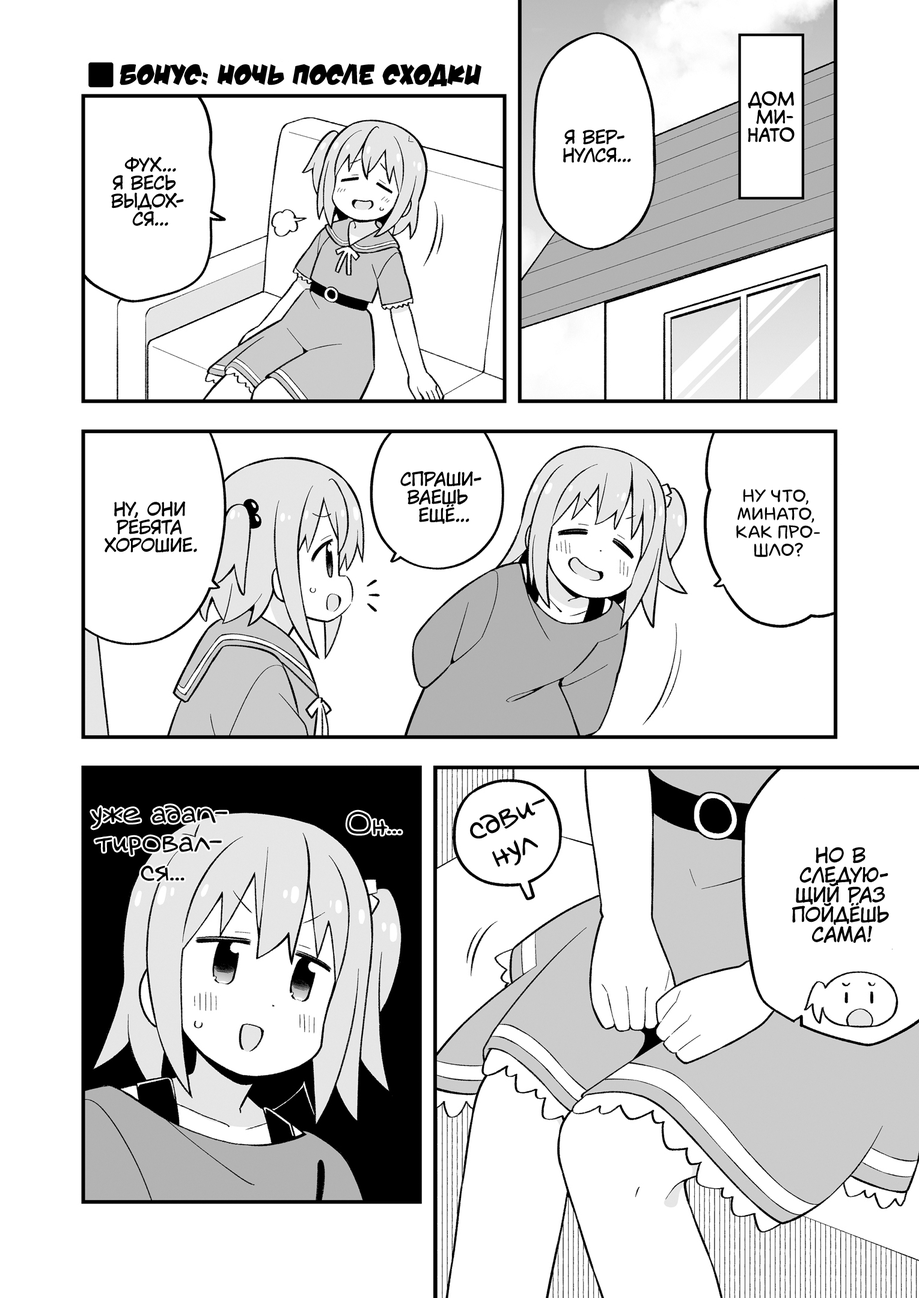
<style>
.page{position:relative;width:919px;height:1298px;background:#ffffff}
.page>*{position:absolute;margin:0}
.t1{font:28.8px "v_DamnNoisyKids";color:#000000;text-transform:uppercase}
.t2{font:18px "v_CCMonologous";color:#000000;text-transform:uppercase}
.t3{font:18px "KuraiVoice2";color:#000000;text-transform:uppercase}
.t4{font:18px "laCartoonerie";color:#000000;text-transform:uppercase}
.t5{font:32.4px "v_Augie";color:#000000}
.t6{font:28.8px "v_Augie";color:#000000}
.t7{font:19.8px "KuraiVoice2";color:#000000;text-transform:uppercase}
</style>
<div class="page">
<p class="t1" style="left:120px;top:63px;width:361px;height:24px">Бонус: Ночь после сходки</p>
<p class="t2" style="left:747px;top:91px;width:47px;height:51px;text-align:center">Дом<br>Ми-<br>нато</p>
<p class="t3" style="left:563px;top:129px;width:68px;height:34px;text-align:center">Я вер-<br>нулся...</p>
<p class="t3" style="left:111px;top:157px;width:73px;height:69px;text-align:center">Фух...<br>Я весь<br>выдох-<br>ся...</p>
<p class="t3" style="left:400px;top:470px;width:81px;height:54px;text-align:center">Спраши-<br>ваешь<br>ещё...</p>
<p class="t4" style="left:736px;top:489px;width:84px;height:68px;text-align:center">Ну что,<br>Минато,<br>как про-<br>шло?</p>
<p class="t3" style="left:105px;top:501px;width:92px;height:52px;text-align:center">Ну, они<br>ребята<br>хорошие.</p>
<p class="t5" style="left:470px;top:798px;width:75px;height:69px;text-align:center;rotate:-22deg">сдви-<br>нул</p>
<p class="t6" style="left:91px;top:805px;width:137px;height:76px;text-align:center">уже адап-<br>тировал-<br>ся...</p>
<p class="t7" style="left:792px;top:847px;width:97px;height:96px;text-align:center">Но в<br>следую-<br>щий раз<br>пойдёшь<br>сама!</p>
</div>
